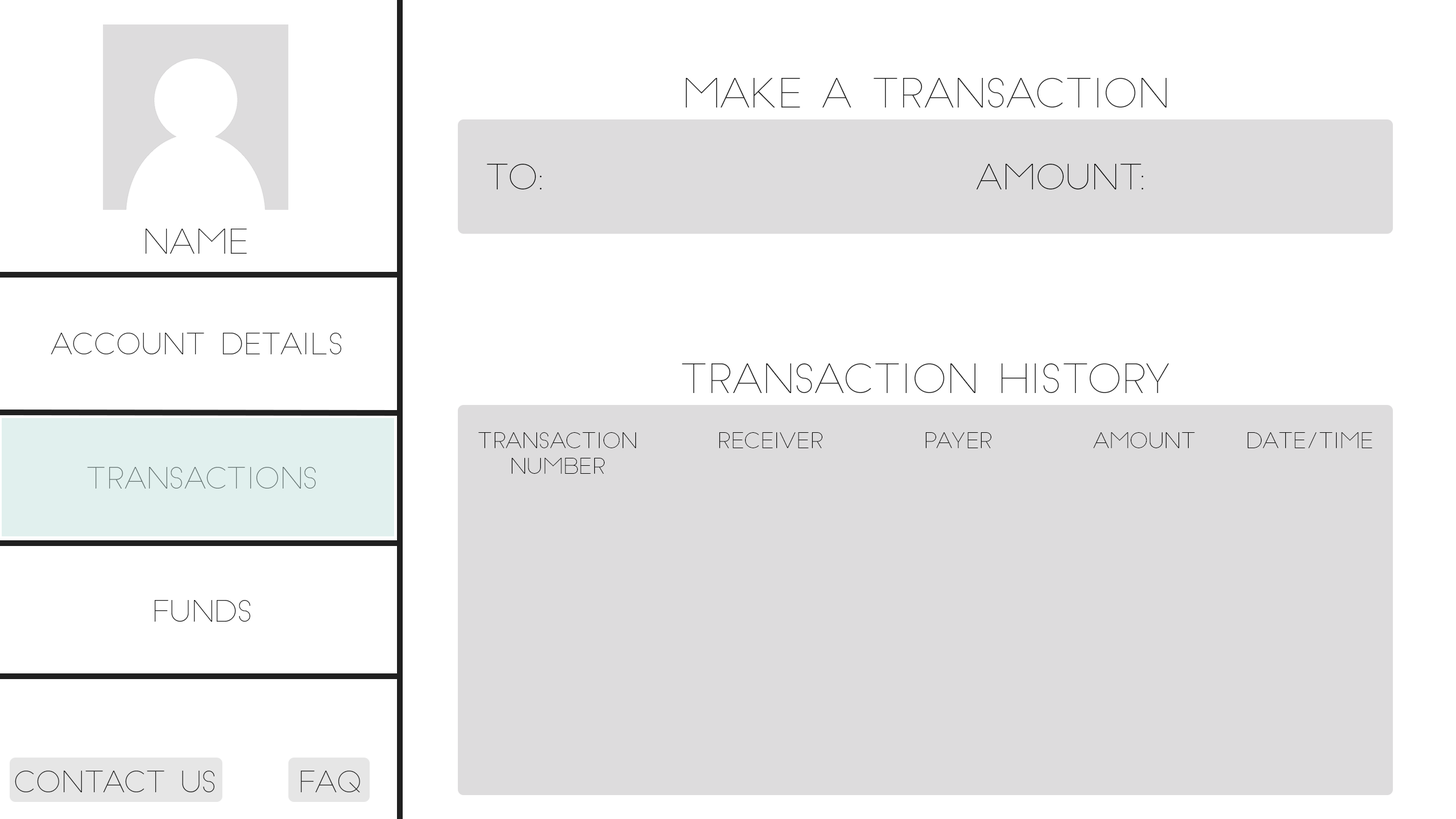
<style>
.page{position:relative;width:1456px;height:819px;background:#ffffff}
.page>*{position:absolute;margin:0}
.t1{font:39.3px "SlimJoe";color:#202020}
.t2{font:34.3px "SlimJoe";color:#020202}
.t3{font:21.1px "SlimJoe";color:#020202}
</style>
<div class="page">
<p class="t1" style="left:685px;top:78px;width:481px;height:29px">MAKE A TRANSACTION</p>
<p class="t2" style="left:487px;top:164px;width:54px;height:25px">TO:</p>
<p class="t2" style="left:977px;top:164px;width:166px;height:26px">AMOUNT:</p>
<p class="t1" style="left:682px;top:363px;width:487px;height:30px">TRANSACTION HISTORY</p>
<p class="t3" style="left:478px;top:432px;width:158px;height:42px;text-align:center">TRANSACTION<br>NUMBER</p>
<p class="t3" style="left:719px;top:432px;width:103px;height:16px">RECEIVER</p>
<p class="t3" style="left:925px;top:432px;width:66px;height:16px">PAYER</p>
<p class="t3" style="left:1093px;top:432px;width:102px;height:16px">AMOUNT</p>
<p class="t3" style="left:1247px;top:432px;width:125px;height:16px">DATE/TIME</p>
</div>
